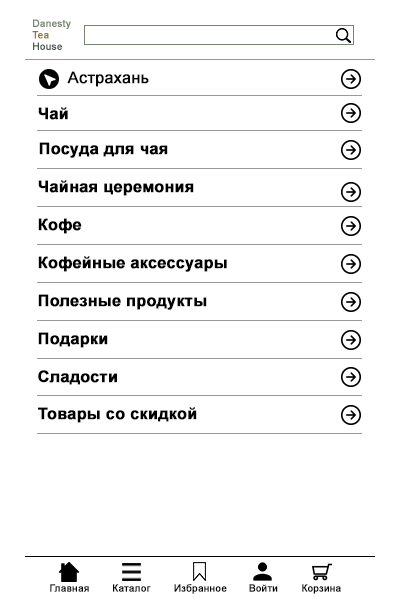
<style>
.page{position:relative;width:400px;height:600px;background:#ffffff}
.page>*{position:absolute;margin:0}
.t1{font:10px/3.8px "ArialMT";color:#76856e;font-weight:bold}
.t2{font:10px/3.8px "ArialMT";color:#8e7734;font-weight:bold}
.t3{font:10px/3.8px "ArialMT";color:#4a5656;font-weight:bold}
.t4{font:16px "ArialMT";color:#000000;font-weight:bold}
.t5{font:16px "Arial-BoldMT";color:#000000;font-weight:bold}
.t6{font:10px "ArialMT";color:#000000;font-weight:bold}
</style>
<div class="page">
<p class="t1" style="left:32px;top:19px;width:39px;height:31px">Danesty <br><br><br><span class="t2">Tea <br><br><br></span><span class="t3">House</span></p>
<p class="t4" style="left:67px;top:71px;width:82px;height:16px">Астрахань</p>
<p class="t5" style="left:38px;top:107px;width:30px;height:13px">Чай</p>
<p class="t5" style="left:39px;top:142px;width:129px;height:16px">Посуда для чая</p>
<p class="t5" style="left:38px;top:180px;width:156px;height:16px">Чайная церемония</p>
<p class="t5" style="left:38px;top:218px;width:44px;height:16px">Кофе</p>
<p class="t5" style="left:38px;top:256px;width:189px;height:16px">Кофейные аксессуары</p>
<p class="t5" style="left:38px;top:294px;width:169px;height:16px">Полезные продукты</p>
<p class="t5" style="left:38px;top:332px;width:70px;height:16px">Подарки</p>
<p class="t5" style="left:38px;top:370px;width:79px;height:15px">Сладости</p>
<p class="t5" style="left:38px;top:407px;width:159px;height:16px">Товары со скидкой</p>
<p class="t6" style="left:50px;top:584px;width:39px;height:8px">Главная</p>
<p class="t6" style="left:113px;top:584px;width:38px;height:8px">Каталог</p>
<p class="t6" style="left:174px;top:584px;width:53px;height:10px">Избранное</p>
<p class="t6" style="left:249px;top:584px;width:29px;height:8px">Войти</p>
<p class="t6" style="left:302px;top:584px;width:39px;height:10px">Корзина</p>
</div>
